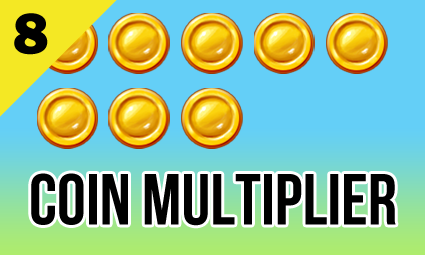
<style>
.page{position:relative;width:425px;height:255px;background:#64cff7}
.page>*{position:absolute;margin:0}
.t1{font:60px "FranklinGothic-Heavy";color:#000000}
.t2{font:72px "BebasNeueBold";color:#000000}
</style>
<div class="page">
<p class="t1" style="left:14px;top:13px;width:34px;height:42px">8</p>
<p class="t2" style="left:31px;top:173px;width:365px;height:53px">COIN MULTIPLIER</p>
</div>
